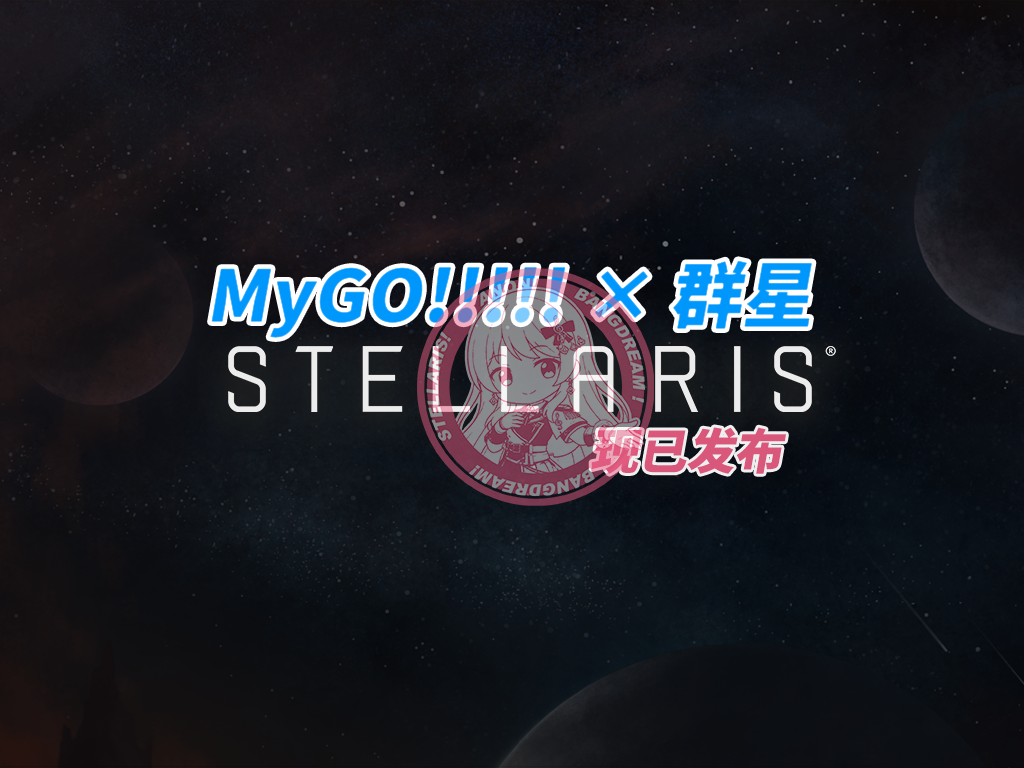
<style>
.page{position:relative;width:1024px;height:768px}
.page>*{position:absolute;margin:0}
.t1{font:72px "NotoSansHans-Black";color:#0097fc;font-style:italic}
.t2{font:48px "NotoSansHans-Black";color:#e85d83;font-style:italic}
</style>
<div class="page">
<p class="t1" style="left:211px;top:260px;width:602px;height:78px">MyGO!!!!! × 群星</p>
<p class="t2" style="left:591px;top:427px;width:195px;height:47px;opacity:0.9">现已发布</p>
</div>
